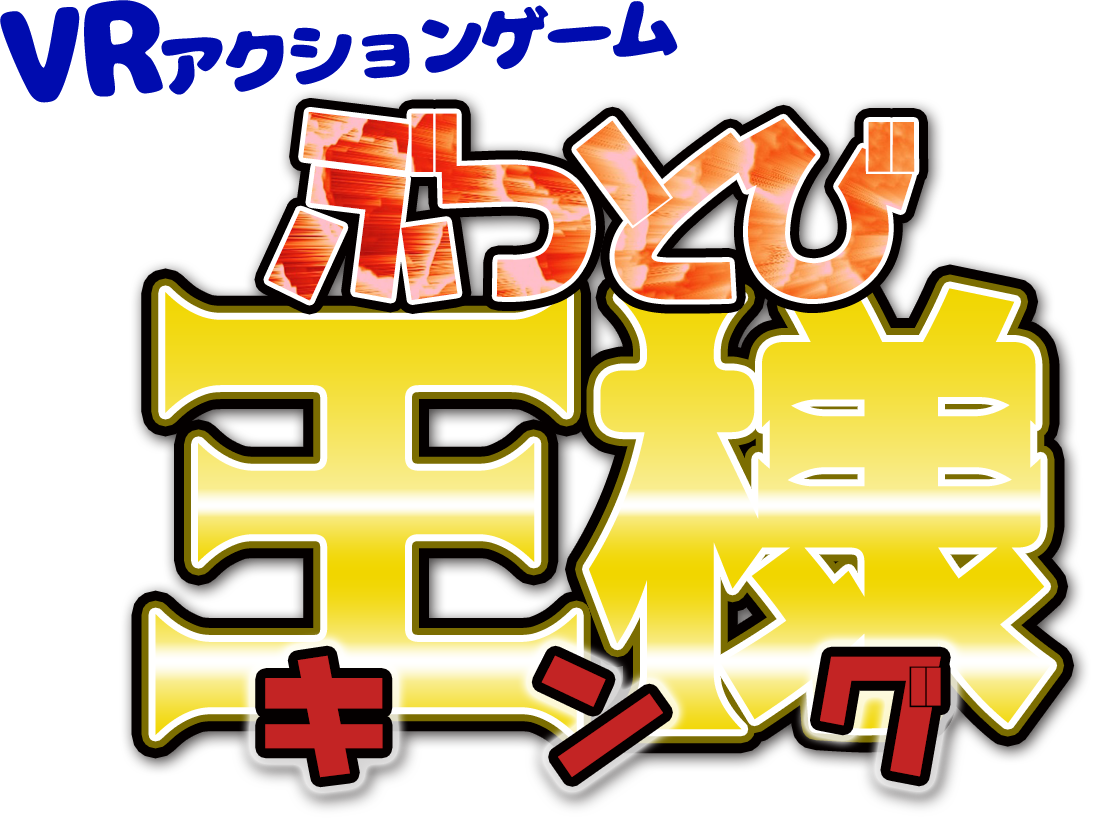
<style>
.page{position:relative;width:1098px;height:829px;background:#ffffff}
.page>*{position:absolute;margin:0}
.t1{font:72px "07NikumaruFont";letter-spacing:-0.1em;color:#000caf}
.t2{font:133px "07NikumaruFont";letter-spacing:-0.1em;color:#000caf}
.t3{font:190.5px "haramase_nyanko";letter-spacing:-0.2em}
.t4{font:123.1px "haramase_nyanko";letter-spacing:1.26em;color:#c32424}
</style>
<div class="page">
<p class="t1" style="left:0px;top:0px;width:678px;height:103px;rotate:-5deg"><span class="t2">VR</span>アクションゲーム</p>
<p class="t3" style="left:268px;top:112px;width:647px;height:189px">ぶっとび</p>
<p class="t4" style="left:265px;top:655px;width:676px;height:123px">キング</p>
</div>
